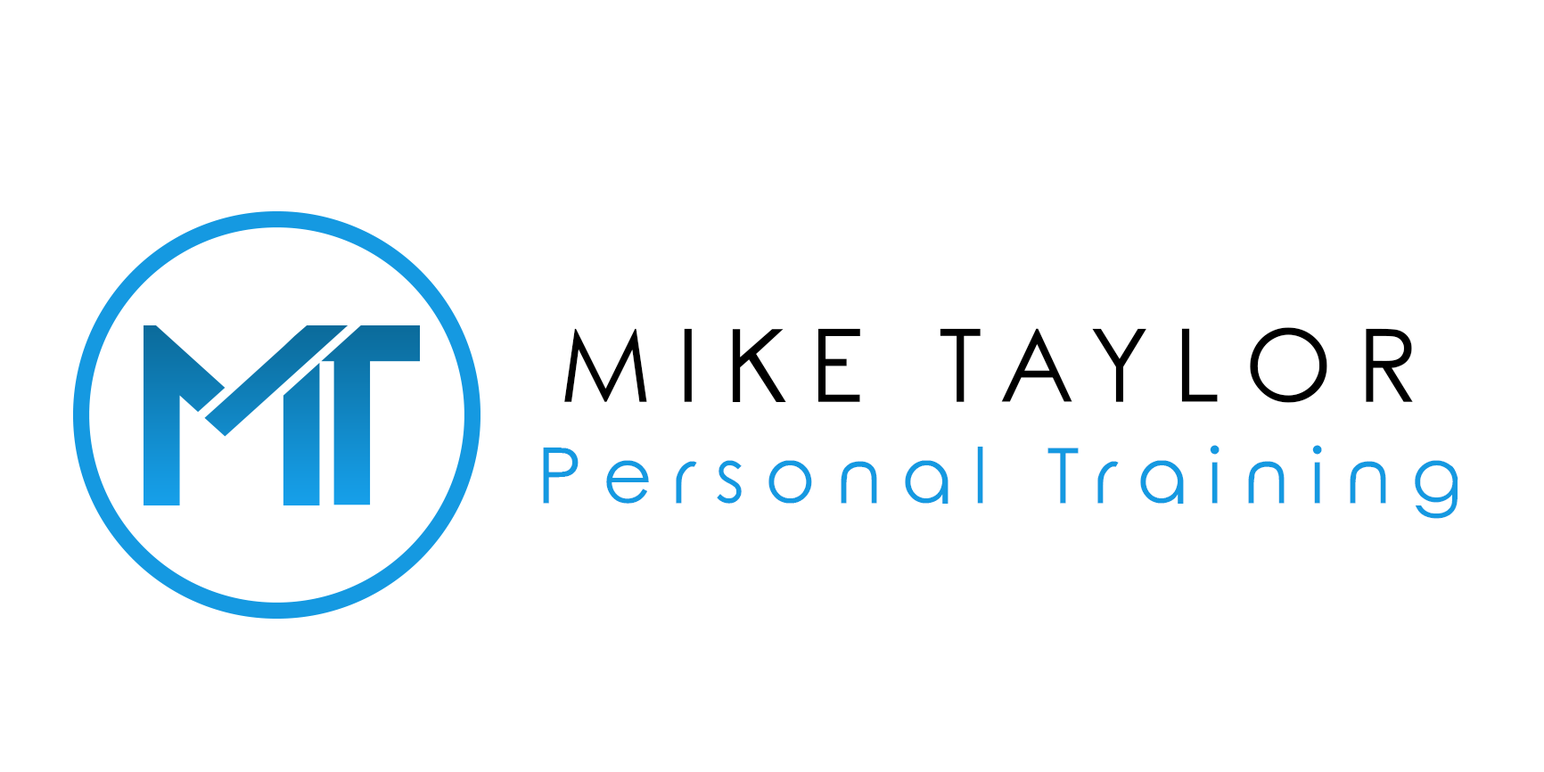
<style>
.page{position:relative;width:1544px;height:772px;background:#ffffff}
.page>*{position:absolute;margin:0}
.t1{font:101px "RoundedElegance-Regular";letter-spacing:0.24em;color:#000000;text-transform:uppercase}
.t2{font:76.5px "RoundedElegance-Regular";letter-spacing:0.26em;color:#1599e1}
</style>
<div class="page">
<p class="t1" style="left:564px;top:327px;width:849px;height:76px">Mike Taylor</p>
<p class="t2" style="left:543px;top:445px;width:916px;height:74px">Personal Training</p>
</div>
